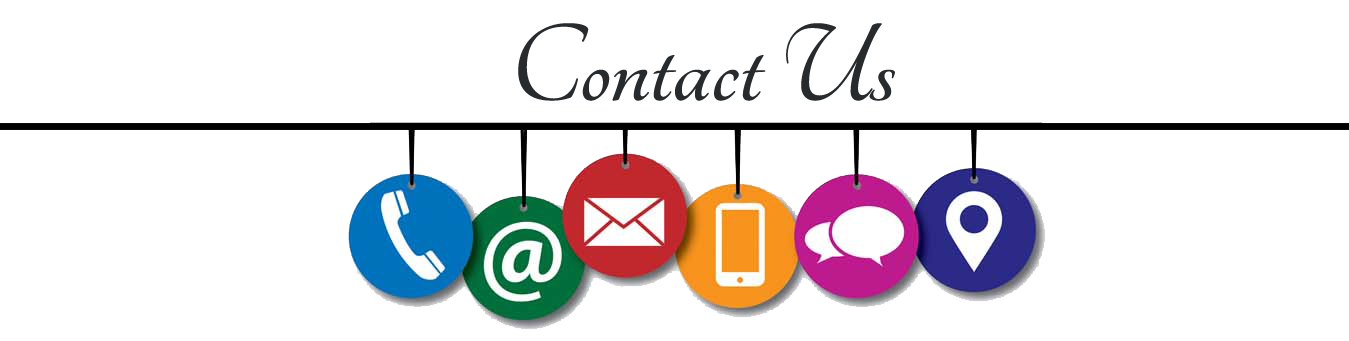
<style>
.page{position:relative;width:1349px;height:341px;background:#ffffff}
.page>*{position:absolute;margin:0}
.t1{font:120px "Tangerine-Bold";color:#272b2e}
</style>
<div class="page">
<p class="t1" style="left:518px;top:23px;width:377px;height:78px">Contact Us</p>
</div>
